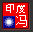
<style>
.page{position:relative;width:33px;height:32px;background:#f20000}
.page>*{position:absolute;margin:0}
.t1{font:10.4px "SimSun";color:#ffffff}
.t2{font:11.7px "SimSun";color:#ffffff}
</style>
<div class="page">
<p class="t1" style="left:6px;top:4px;width:19px;height:9px">印度</p>
<p class="t2" style="left:16px;top:15px;width:11px;height:12px">冯</p>
</div>
